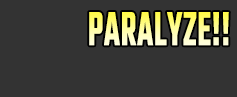
<style>
.page{position:relative;width:237px;height:97px;background:#333333}
.page>*{position:absolute;margin:0}
.t1{font:51.9px "Teko-Semibold";font-weight:bold;scale:0.64 1}
</style>
<div class="page">
<p class="t1" style="left:89px;top:12px;width:140px;height:34px">PARALYZE!!</p>
</div>
